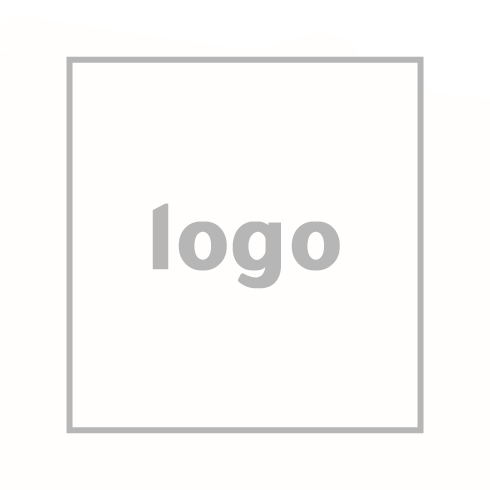
<style>
.page{position:relative;width:490px;height:490px;background:#fffefd}
.page>*{position:absolute;margin:0}
.t1{font:100px "Tajawal-Bold";color:#b6b6b6;font-weight:bold}
</style>
<div class="page">
<p class="t1" style="left:152px;top:203px;width:188px;height:86px">logo</p>
</div>
